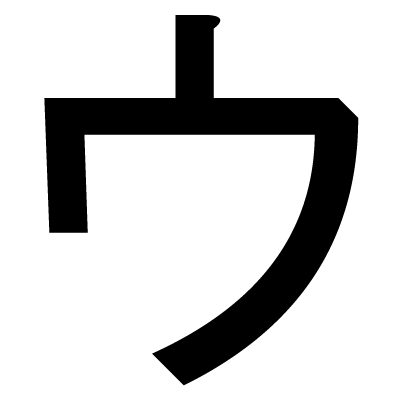
<style>
.page{position:relative;width:400px;height:400px;background:#ffffff}
.page>*{position:absolute;margin:0}
.t1{font:424.8px "MS-PGothic";color:#000000}
</style>
<div class="page">
<p class="t1" style="left:44px;top:15px;width:315px;height:371px">ウ</p>
</div>
